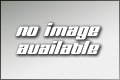
<style>
.page{position:relative;width:120px;height:80px}
.page>*{position:absolute;margin:0}
.t1{font:18px/18px "BNJinx";letter-spacing:0.01em;color:#ffffff}
</style>
<div class="page">
<p class="t1" style="left:16px;top:23px;width:84px;height:31px;text-align:center">no image<br>available</p>
</div>
